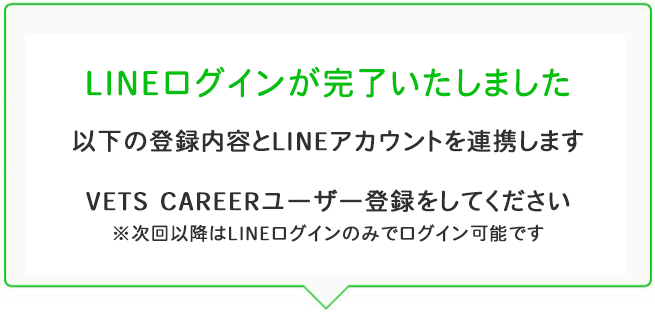
<style>
.page{position:relative;width:655px;height:320px;background:#ffffff}
.page>*{position:absolute;margin:0}
.t1{font:32px "HeiseiMaruGoStd-W4";letter-spacing:0.05em;color:#05c00f;font-weight:bold}
.t2{font:24px/30px "HeiseiMaruGoStd-W4";letter-spacing:0.05em;color:#303030;font-weight:bold}
.t3{font:18px/30px "HeiseiMaruGoStd-W4";letter-spacing:0.05em;color:#303030;font-weight:bold}
</style>
<div class="page">
<p class="t1" style="left:87px;top:66px;width:483px;height:32px">LINEログインが完了いたしました</p>
<p class="t2" style="left:73px;top:129px;width:511px;height:113px;text-align:center">以下の登録内容とLINEアカウントを連携します<br><br>VETS CAREERユーザー登録をしてください<br><span class="t3">※次回以降はLINEログインのみでログイン可能です</span></p>
</div>
